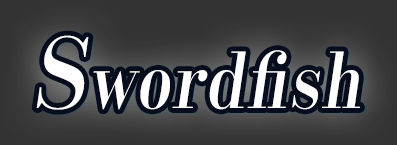
<style>
.page{position:relative;width:397px;height:145px}
.page>*{position:absolute;margin:0}
.t1{font:76.8px "KochoStd-Heavy";letter-spacing:0.04em;color:#ffffff;font-style:italic;scale:0.83 1}
.t2{font:96px "KochoStd-Heavy";letter-spacing:0.04em;color:#ffffff;font-style:italic;scale:0.83 1}
</style>
<div class="page">
<p class="t1" style="left:36px;top:35px;width:324px;height:75px"><span class="t2">S</span>wordfish</p>
</div>
